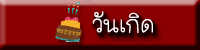
<style>
.page{position:relative;width:200px;height:50px;background:#8a0000}
.page>*{position:absolute;margin:0}
.t1{font:36px "THMaliGrade6-Bold";color:#fefefe}
</style>
<div class="page">
<p class="t1" style="left:92px;top:11px;width:61px;height:23px">วันเกิด</p>
</div>
